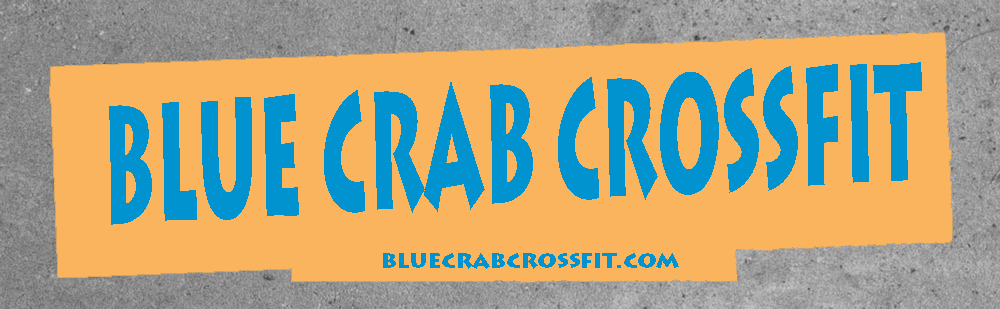
<style>
.page{position:relative;width:1000px;height:309px;background:#f9b45d}
.page>*{position:absolute;margin:0}
.t1{font:165.8px "LithosPro-Black";color:#0093d0;scale:0.43 1}
.t2{font:24px "LithosPro-Black";color:#0093d0}
</style>
<div class="page">
<p class="t1" style="left:109px;top:62px;width:813px;height:163px;rotate:-3deg">BLUE CRAB CROSSFIT</p>
<p class="t2" style="left:383px;top:253px;width:296px;height:16px">bluecrabcrossfit.com</p>
</div>
